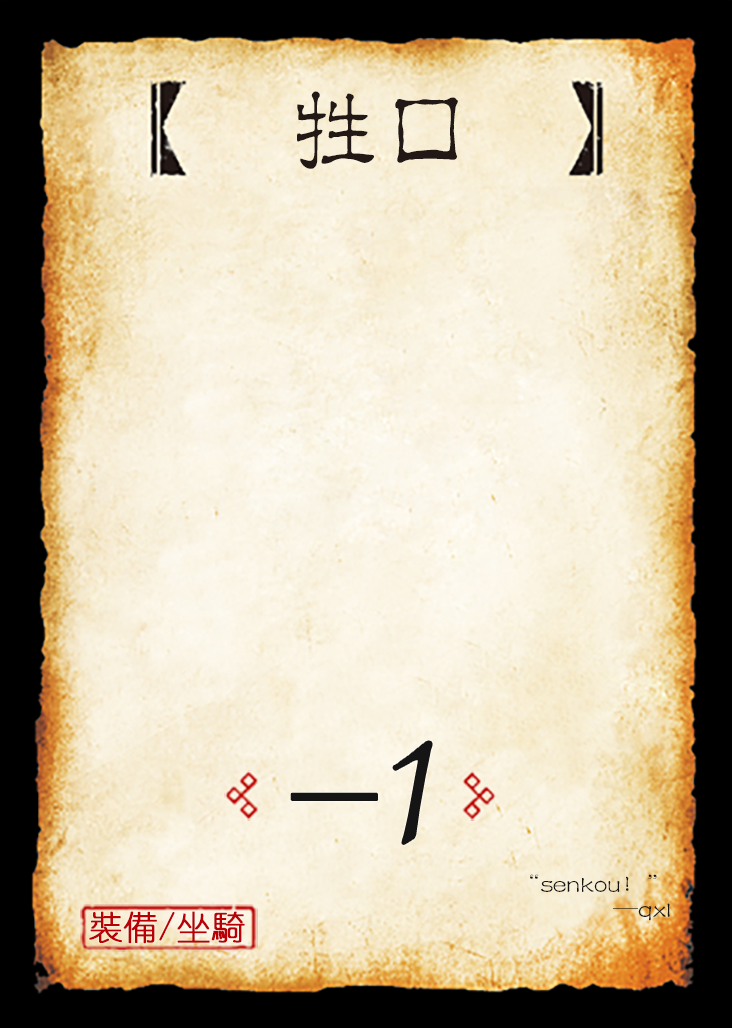
<style>
.page{position:relative;width:732px;height:1028px}
.page>*{position:absolute;margin:0}
.t1{font:95.8px "JMFLS_GBK";color:#221815;scale:0.95 1}
.t2{font:191.7px "Jxixinkai";color:#151515}
.t3{font:25px/25px "FZLBJW--GB1-0";color:#151515}
.t4{font:33.3px "YouYuan";color:#ba0007;font-weight:bold}
</style>
<div class="page">
<p class="t1" style="left:297px;top:91px;width:161px;height:78px">牲口</p>
<p class="t2" style="left:393px;top:741px;width:39px;height:103px">1</p>
<p class="t3" style="left:530px;top:874px;width:140px;height:47px;text-align:right">“senkou！”<br>—qxl</p>
<p class="t4" style="left:89px;top:911px;width:156px;height:33px">裝備/坐騎</p>
</div>
